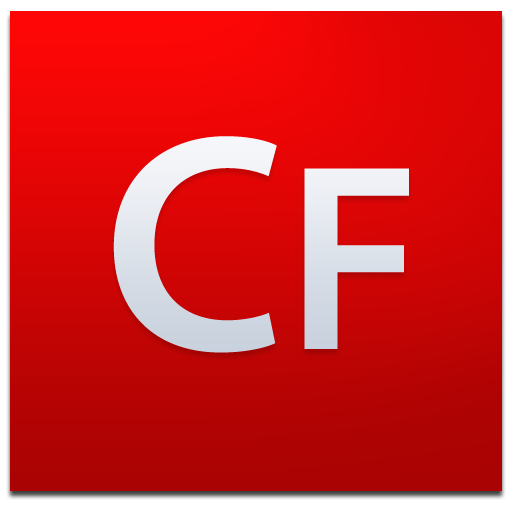
<style>
.page{position:relative;width:512px;height:512px}
.page>*{position:absolute;margin:0}
.t1{font:310.4px "MyriadPro-Semibold";color:#dee3eb}
.t2{font:267.4px "MyriadPro-Semibold";color:#dee3eb}
</style>
<div class="page">
<p class="t1" style="left:113px;top:136px;width:296px;height:217px">C<span class="t2">F</span></p>
</div>
